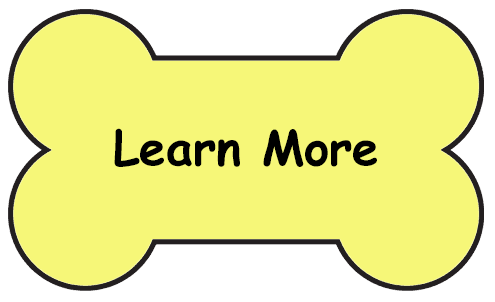
<style>
.page{position:relative;width:495px;height:302px;background:#f6f778}
.page>*{position:absolute;margin:0}
.t1{font:48px "ComicSansMS-Bold";color:#000000}
</style>
<div class="page">
<p class="t1" style="left:114px;top:128px;width:263px;height:39px">Learn More</p>
</div>
